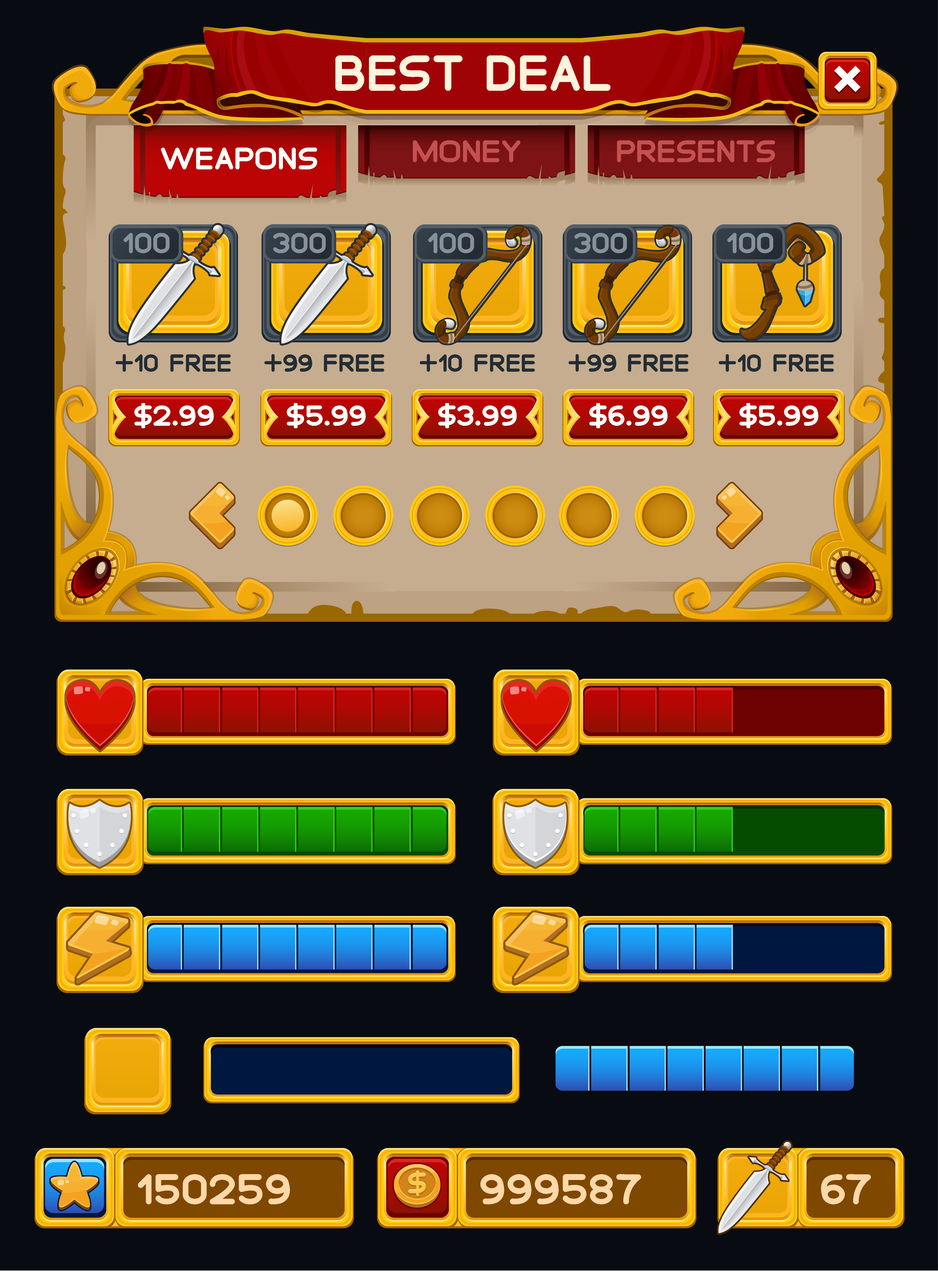
<style>
.page{position:relative;width:938px;height:1271px;background:#090b13}
.page>*{position:absolute;margin:0}
.t1{font:44.1px "SaranaiGame-Bold";color:#fff4dc}
.t2{font:27.2px "SaranaiGame-Bold";color:#fdfefb}
.t3{font:27.2px "SaranaiGame-Bold";color:#c45151}
.t4{font:25.3px "SaranaiGame-Bold";color:#879199}
.t5{font:21.6px "SaranaiGame-Bold";color:#232c35}
.t6{font:25.4px "SaranaiGame-Bold";color:#fdfefb}
.t7{font:37.5px "SaranaiGame-Bold";color:#ffd8a9}
</style>
<div class="page">
<p class="t1" style="left:336px;top:55px;width:275px;height:36px">best deal</p>
<p class="t2" style="left:161px;top:148px;width:156px;height:21px">weapons</p>
<p class="t3" style="left:413px;top:140px;width:108px;height:22px">money</p>
<p class="t3" style="left:617px;top:140px;width:158px;height:22px">presents</p>
<p class="t4" style="left:124px;top:233px;width:46px;height:20px">100</p>
<p class="t4" style="left:273px;top:233px;width:53px;height:20px">300</p>
<p class="t4" style="left:428px;top:233px;width:46px;height:20px">100</p>
<p class="t4" style="left:575px;top:233px;width:52px;height:20px">300</p>
<p class="t4" style="left:728px;top:233px;width:46px;height:20px">100</p>
<p class="t5" style="left:116px;top:354px;width:115px;height:18px">+10 free</p>
<p class="t5" style="left:265px;top:354px;width:119px;height:18px">+99 free</p>
<p class="t5" style="left:420px;top:354px;width:115px;height:18px">+10 free</p>
<p class="t5" style="left:569px;top:354px;width:120px;height:18px">+99 free</p>
<p class="t5" style="left:719px;top:354px;width:115px;height:18px">+10 free</p>
<p class="t6" style="left:134px;top:403px;width:80px;height:25px">$2.99</p>
<p class="t6" style="left:287px;top:403px;width:79px;height:25px">$5.99</p>
<p class="t6" style="left:438px;top:403px;width:79px;height:25px">$3.99</p>
<p class="t6" style="left:590px;top:403px;width:78px;height:25px">$6.99</p>
<p class="t6" style="left:740px;top:403px;width:79px;height:25px">$5.99</p>
<p class="t7" style="left:138px;top:1174px;width:152px;height:30px">150259</p>
<p class="t7" style="left:481px;top:1174px;width:160px;height:30px">999587</p>
<p class="t7" style="left:821px;top:1174px;width:50px;height:30px">67</p>
</div>
